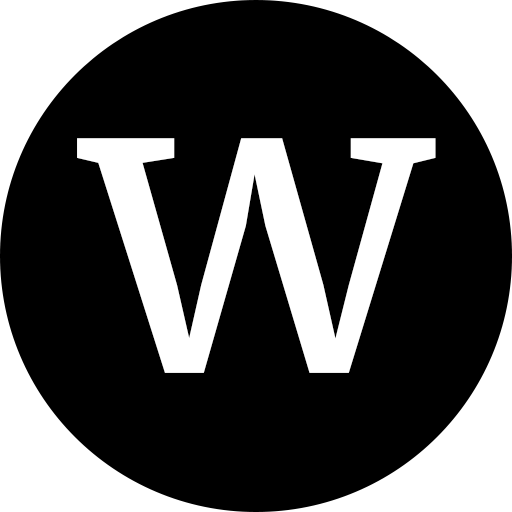
<style>
.page{position:relative;width:512px;height:512px;background:#000000}
.page>*{position:absolute;margin:0}
.t1{font:416.7px "Merriweather-Regular";color:#ffffff}
</style>
<div class="page">
<p class="t1" style="left:77px;top:138px;width:359px;height:235px">w</p>
</div>
